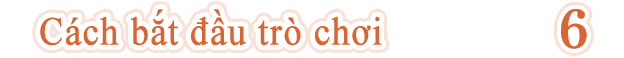
<style>
.page{position:relative;width:624px;height:58px;background:#ffffff}
.page>*{position:absolute;margin:0}
.t1{font:39.6px "TimesNewRomanPSMT";letter-spacing:0.02em;color:#dc6432;font-weight:bold;scale:0.91 1}
</style>
<div class="page">
<p class="t1" style="left:40px;top:9px;width:342px;height:37px">Cách bắt đầu trò chơi</p>
</div>
